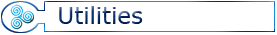
<style>
.page{position:relative;width:277px;height:35px;background:#ffffff}
.page>*{position:absolute;margin:0}
.t1{font:22.9px "Verdana"}
</style>
<div class="page">
<p class="t1" style="left:59px;top:6px;width:84px;height:18px">Utilities</p>
</div>
